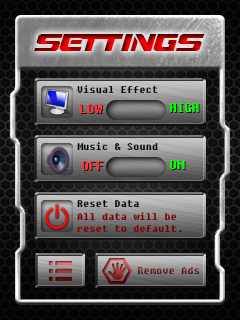
<style>
.page{position:relative;width:240px;height:320px}
.page>*{position:absolute;margin:0}
.t1{font:24px "DreamMMA"}
.t2{font:10px "Fixedsys";color:#000000}
.t3{font:12px "Fixedsys";color:#ff3535}
.t4{font:12px "Fixedsys";color:#00ff00}
.t5{font:10px "Fixedsys";color:#7a0000}
.t6{font:10px "Fixedsys"}
</style>
<div class="page">
<p class="t1" style="left:34px;top:34px;width:171px;height:17px">settings</p>
<p class="t2" style="left:77px;top:85px;width:81px;height:8px">Visual Effect</p>
<p class="t3" style="left:79px;top:104px;width:24px;height:9px">LOW</p>
<p class="t4" style="left:169px;top:103px;width:30px;height:9px">HIGH</p>
<p class="t2" style="left:77px;top:142px;width:81px;height:8px">Music &amp; Sound</p>
<p class="t3" style="left:81px;top:161px;width:23px;height:9px">OFF</p>
<p class="t4" style="left:169px;top:160px;width:16px;height:9px">ON</p>
<p class="t2" style="left:77px;top:200px;width:62px;height:7px">Reset Data</p>
<p class="t5" style="left:77px;top:212px;width:105px;height:20px">All data will be<br>reset to default.</p>
<p class="t6" style="left:138px;top:267px;width:62px;height:7px">Remove Ads</p>
</div>
